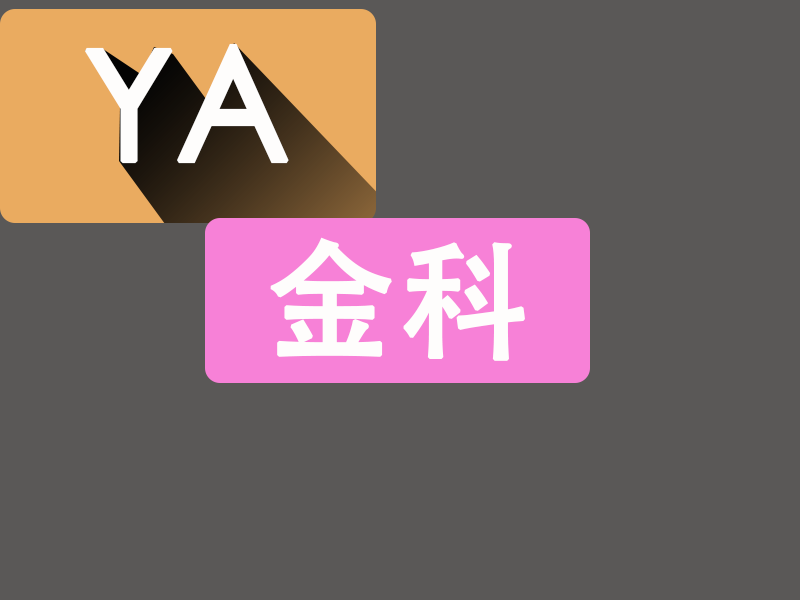
<style>
.page{position:relative;width:800px;height:600px;background:#5a5857}
.page>*{position:absolute;margin:0}
.t1{font:150.5px "STHeitiSC-Medium";color:#fefdfc;font-weight:bold}
.t2{font:129.6px "STHeitiSC-Medium";color:#fefdfc;font-weight:bold}
</style>
<div class="page">
<p class="t1" style="left:84px;top:43px;width:205px;height:121px">YA</p>
<p class="t2" style="left:270px;top:237px;width:255px;height:124px">金科</p>
</div>
